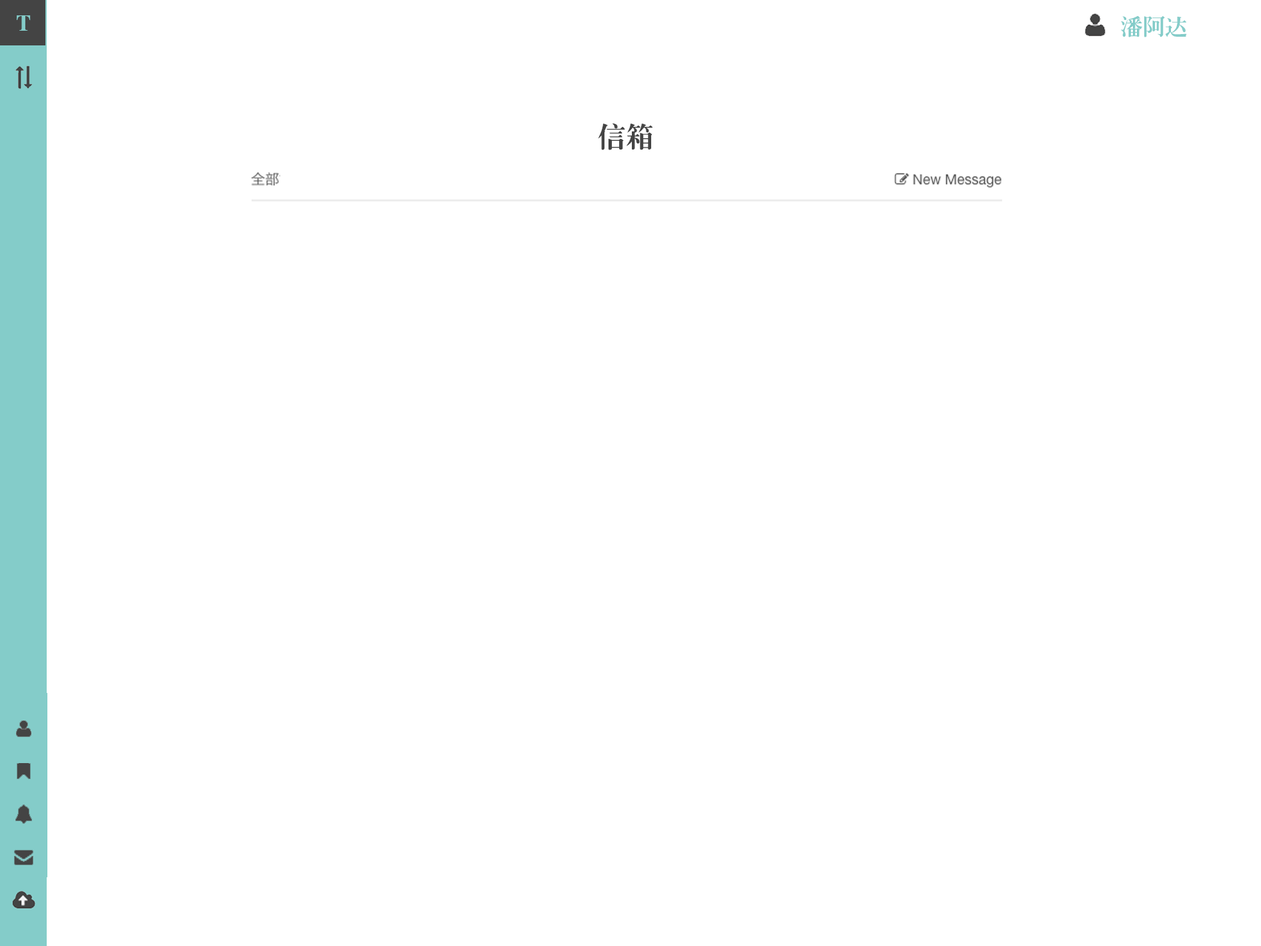
<style>
.page{position:relative;width:1261px;height:946px;background:#ffffff}
.page>*{position:absolute;margin:0}
.t1{font:22.2px "JQLaoSongJT";color:#84ccc9}
.t2{font:27.8px "JQLaoSongJT";color:#444444}
</style>
<div class="page">
<p class="t1" style="left:17px;top:15px;width:14px;height:16px">T</p>
<p class="t1" style="left:1121px;top:16px;width:66px;height:21px">潘阿达</p>
<p class="t2" style="left:598px;top:123px;width:55px;height:27px">信箱</p>
</div>
